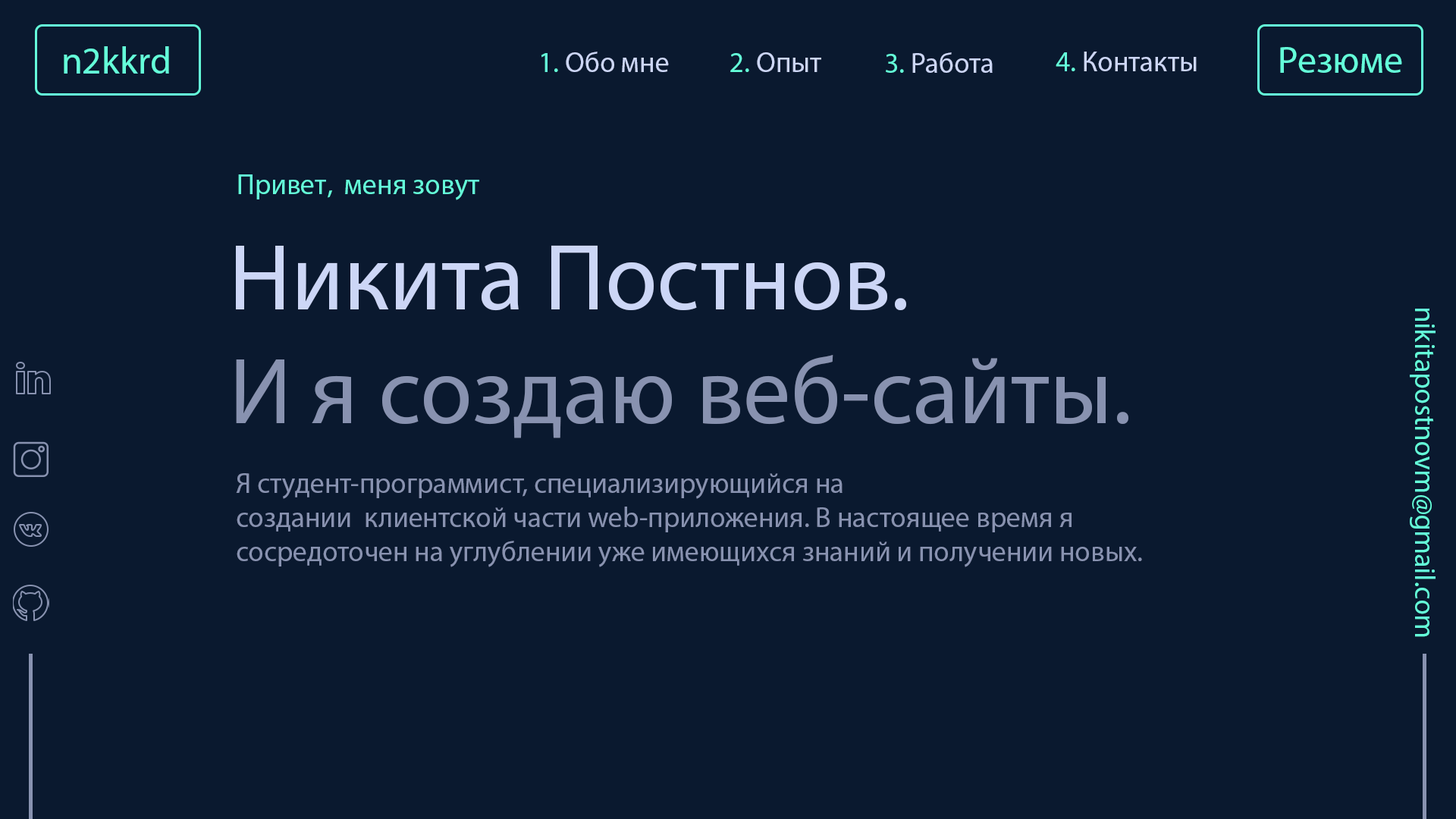
<style>
.page{position:relative;width:1456px;height:819px;background:#0a192f}
.page>*{position:absolute;margin:0}
.t1{font:37.9px "MyriadPro-Regular";color:#64ffda}
.t2{font:28.4px "MyriadPro-Regular";color:#ccd6f6}
.t3{font:28.4px "MyriadPro-Regular";color:#64ffda}
.t4{font:94.8px "MyriadPro-Regular";color:#ccd6f6}
.t5{font:94.8px "MyriadPro-Regular";color:#8892b0}
.t6{font:28.4px "MyriadPro-Regular";color:#8892b0}
</style>
<div class="page">
<p class="t1" style="left:64px;top:46px;width:105px;height:28px">n2kkrd</p>
<p class="t2" style="left:541px;top:52px;width:128px;height:20px"><span class="t3">1. </span>Обо мне</p>
<p class="t2" style="left:730px;top:52px;width:91px;height:20px"><span class="t3">2. </span>Опыт</p>
<p class="t2" style="left:886px;top:52px;width:107px;height:21px"><span class="t3">3. </span>Работа</p>
<p class="t2" style="left:1056px;top:52px;width:141px;height:19px"><span class="t3">4. </span>Контакты</p>
<p class="t1" style="left:1280px;top:47px;width:122px;height:26px">Резюме</p>
<p class="t3" style="left:238px;top:174px;width:241px;height:26px">Привет,  меня зовут</p>
<p class="t4" style="left:236px;top:245px;width:670px;height:66px">Никита Постнов.</p>
<p class="t3" style="left:1410px;top:308px;width:26px;height:329px;rotate:90deg">nikitapostnovm@gmail.com</p>
<p class="t5" style="left:236px;top:355px;width:892px;height:83px">И я создаю веб-сайты.</p>
<p class="t6" style="left:236px;top:473px;width:906px;height:94px">Я студент-программист, специализирующийся на <br>создании  клиентской части web-приложения. В настоящее время я <br>сосредоточен на углублении уже имеющихся знаний и получении новых.</p>
</div>
